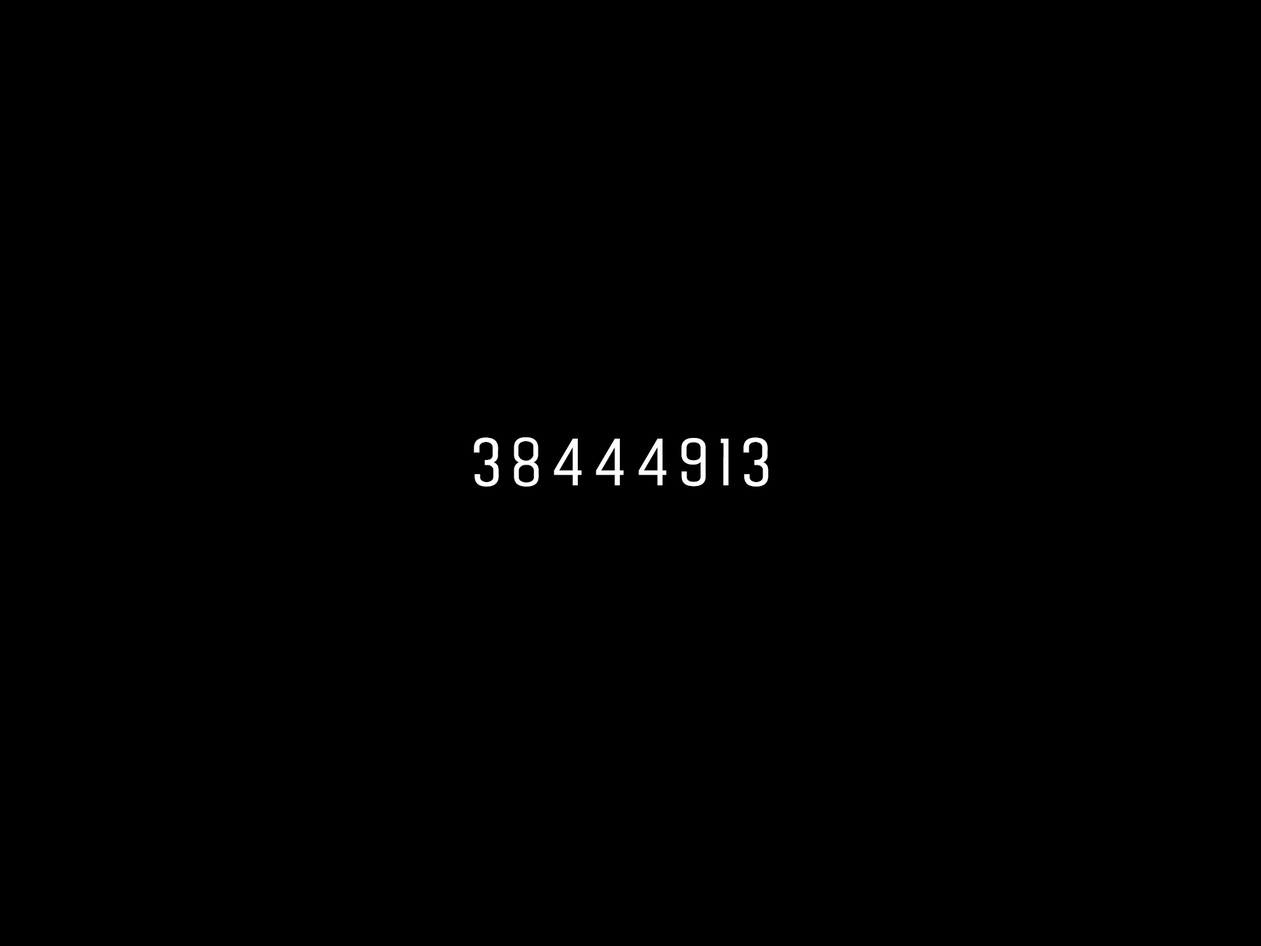
<style>
.page{position:relative;width:1261px;height:946px;background:#000000}
.page>*{position:absolute;margin:0}
.t1{font:66.7px "PeytonDisplay-ExtraLight";letter-spacing:0.12em;color:#ffffff}
</style>
<div class="page">
<p class="t1" style="left:474px;top:437px;width:295px;height:49px">38444913</p>
</div>
